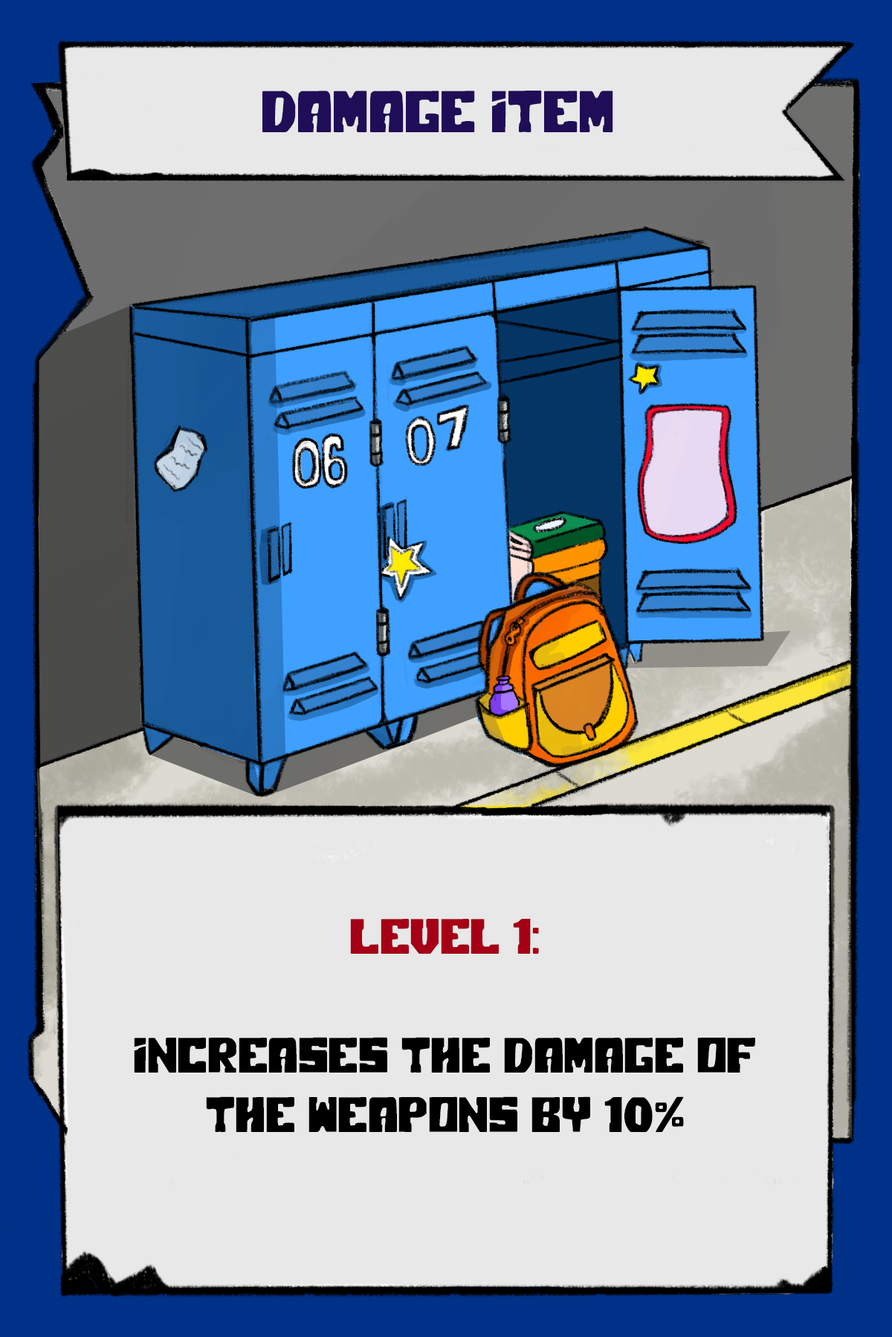
<style>
.page{position:relative;width:892px;height:1337px;background:#e8e8e8}
.page>*{position:absolute;margin:0}
.t1{font:58.8px "PolarPress";color:#1f0e57}
.t2{font:49.5px "PolarPress";color:#000000}
.t3{font:49.5px "PolarPress";color:#a50015}
</style>
<div class="page">
<p class="t1" style="left:262px;top:91px;width:351px;height:41px">Damage item</p>
<p class="t2" style="left:134px;top:919px;width:621px;height:214px;text-align:center"><span class="t3">LEVEL 1:<br></span><br>Increases the damage of the weapons by 10%</p>
</div>
